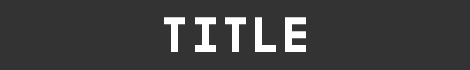
<style>
.page{position:relative;width:470px;height:70px;background:#333333}
.page>*{position:absolute;margin:0}
.t1{font:41.7px "SNchibi_6";letter-spacing:0.06em;color:#ffffff;text-transform:uppercase}
</style>
<div class="page">
<p class="t1" style="left:164px;top:17px;width:142px;height:35px">TiTle</p>
</div>
